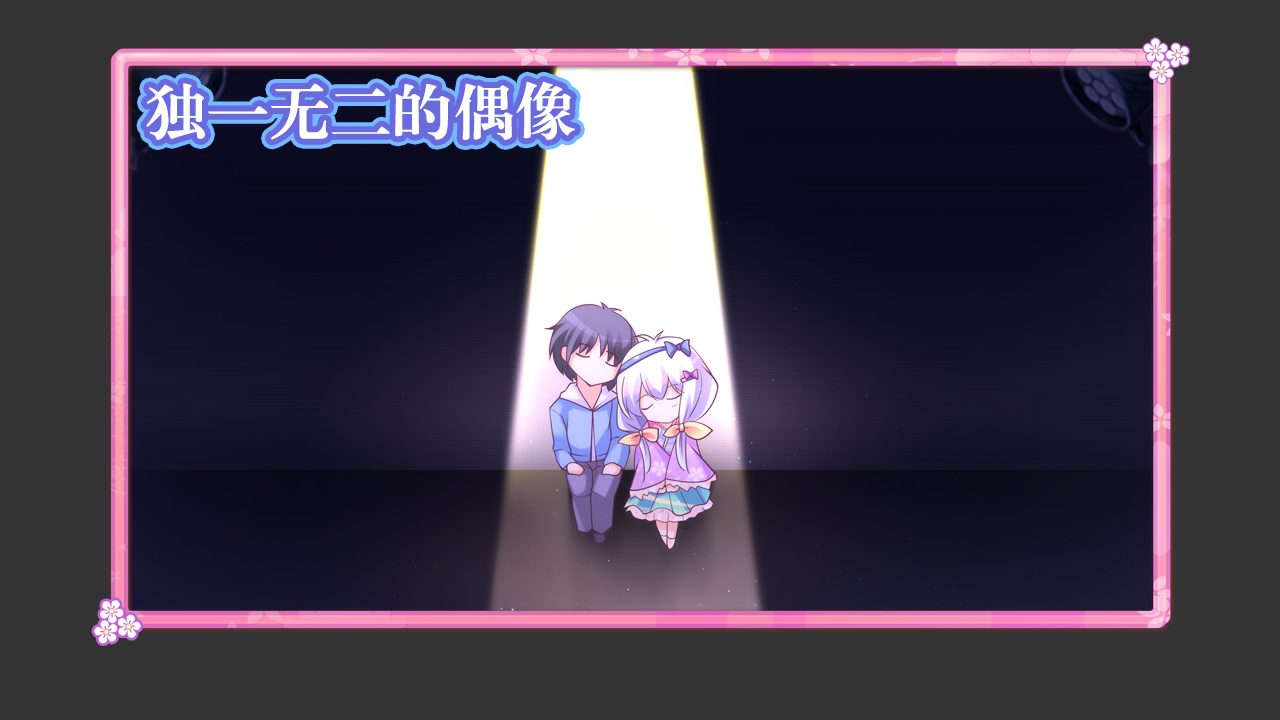
<style>
.page{position:relative;width:1280px;height:720px;background:#333333}
.page>*{position:absolute;margin:0}
.t1{font:60px "FZXBSK--GBK1-0";color:#ffffff;font-weight:bold}
</style>
<div class="page">
<p class="t1" style="left:146px;top:81px;width:429px;height:59px">独一无二的偶像</p>
</div>
